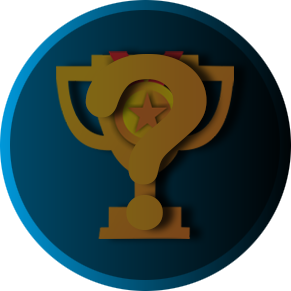
<style>
.page{position:relative;width:291px;height:291px;background:#ffffff}
.page>*{position:absolute;margin:0}
.t1{font:237.9px "ArialRoundedMTBold";color:#7d5916;scale:1.04 1}
</style>
<div class="page">
<p class="t1" style="left:85px;top:54px;width:122px;height:176px">?</p>
</div>
